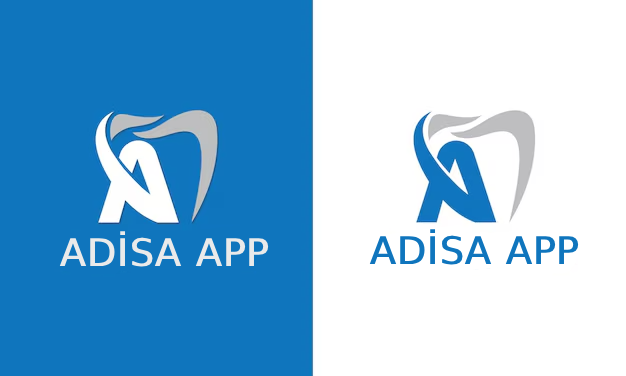
<style>
.page{position:relative;width:626px;height:376px;background:#0f75bd}
.page>*{position:absolute;margin:0}
.t1{font:38px "DejaVuSans";color:#eaeaea;font-weight:bold}
.t2{font:38px "DejaVuSans";color:#0f75bd;font-weight:bold}
</style>
<div class="page">
<p class="t1" style="left:59px;top:231px;width:210px;height:36px">ADİSA APP</p>
<p class="t2" style="left:369px;top:229px;width:210px;height:36px">ADİSA APP</p>
</div>
